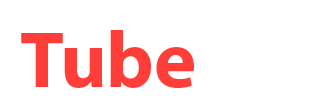
<style>
.page{position:relative;width:326px;height:100px;background:#ffffff}
.page>*{position:absolute;margin:0}
.t1{font:80px "MyriadPro-Bold";color:#ff3e3a}
</style>
<div class="page">
<p class="t1" style="left:21px;top:30px;width:173px;height:58px">Tube</p>
</div>
